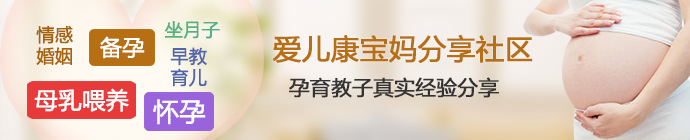
<style>
.page{position:relative;width:690px;height:140px}
.page>*{position:absolute;margin:0}
.t1{font:18.7px/21.3px "FZLTXHK";letter-spacing:-0.04em;color:#a6630a;font-weight:bold}
.t2{font:18.7px "FZLTXHK";letter-spacing:-0.04em;color:#53b284;font-weight:bold}
.t3{font:22.6px "FZLTXHK";letter-spacing:-0.04em;color:#ffffff;font-weight:bold}
.t4{font:29.3px "FZLTHJW--GB1-0";letter-spacing:-0.04em;color:#b66f12;font-weight:bold}
.t5{font:18.7px/21.3px "FZLTXHK";letter-spacing:-0.04em;color:#5165ad;font-weight:bold}
.t6{font:21.3px "FZLTHJW--GB1-0";letter-spacing:-0.04em;color:#333333;font-weight:bold}
.t7{font:24px "FZLTXHK";letter-spacing:-0.04em;color:#ffffff;font-weight:bold}
.t8{font:26.7px "FZLTXHK";letter-spacing:-0.04em;color:#ffffff;font-weight:bold}
</style>
<div class="page">
<p class="t1" style="left:36px;top:25px;width:37px;height:40px;text-align:center">情感<br>婚姻</p>
<p class="t2" style="left:165px;top:21px;width:55px;height:18px">坐月子</p>
<p class="t3" style="left:100px;top:36px;width:45px;height:23px">备孕</p>
<p class="t4" style="left:272px;top:34px;width:261px;height:29px">爱儿康宝妈分享社区</p>
<p class="t5" style="left:170px;top:47px;width:37px;height:40px;text-align:center">早教<br>育儿</p>
<p class="t6" style="left:289px;top:77px;width:210px;height:21px">孕育教子真实经验分享</p>
<p class="t7" style="left:34px;top:88px;width:95px;height:24px">母乳喂养</p>
<p class="t8" style="left:153px;top:99px;width:53px;height:26px">怀孕</p>
</div>
